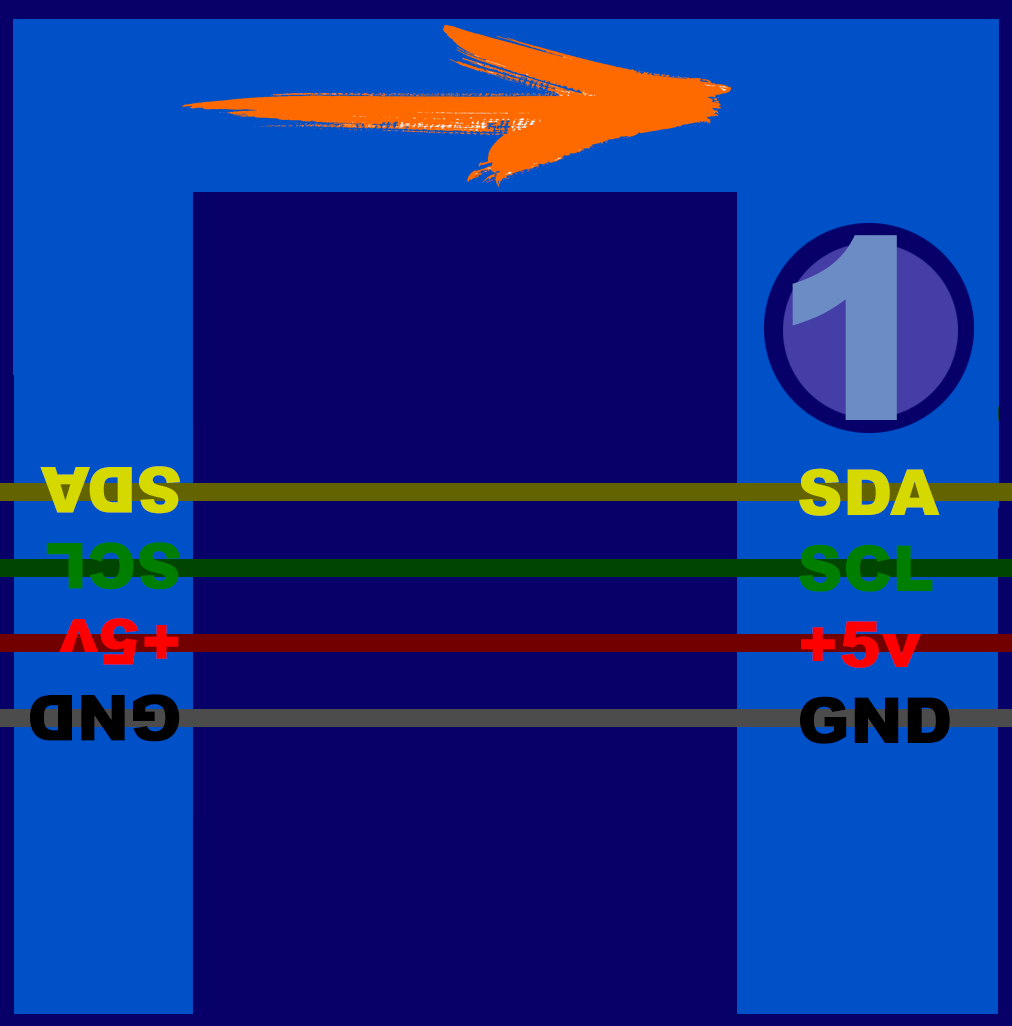
<style>
.page{position:relative;width:1012px;height:1026px;background:#070069}
.page>*{position:absolute;margin:0}
.t1{font:254px "Arial-Black";color:#6c8cc5}
.t2{font:63.4px "Arial-Black";color:#000000}
.t3{font:63.4px "Arial-Black";color:#d6d900}
.t4{font:63.4px "Arial-Black";color:#fe0000}
.t5{font:63.4px "Arial-Black";color:#007e00}
</style>
<div class="page">
<p class="t1" style="left:792px;top:235px;width:105px;height:185px">1</p>
<p class="t2" style="left:30px;top:466px;width:150px;height:276px;rotate:180deg"><span class="t3"><br></span>GND<br><span class="t4">+5v<br></span><span class="t5">SCL<br></span><span class="t3">SDA</span></p>
<p class="t3" style="left:799px;top:468px;width:151px;height:276px">SDA<br><span class="t5">SCL<br></span><span class="t4">+5v<br></span><span class="t2">GND</span></p>
</div>
